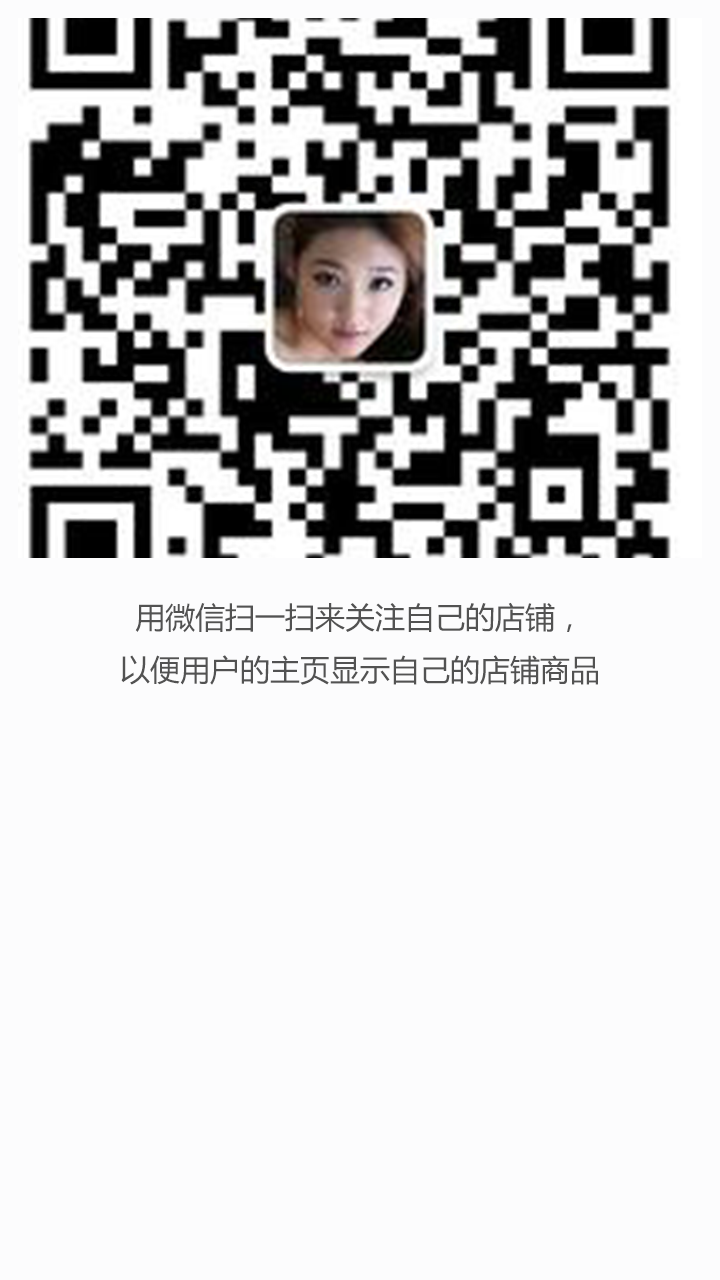
<style>
.page{position:relative;width:720px;height:1280px;background:#fcfcfd}
.page>*{position:absolute;margin:0}
.t1{font:30px "MicrosoftYaHei";color:#525252}
</style>
<div class="page">
<p class="t1" style="left:121px;top:602px;width:477px;height:83px;text-align:center">用微信扫一扫来关注自己的店铺，<br>以便用户的主页显示自己的店铺商品</p>
</div>
